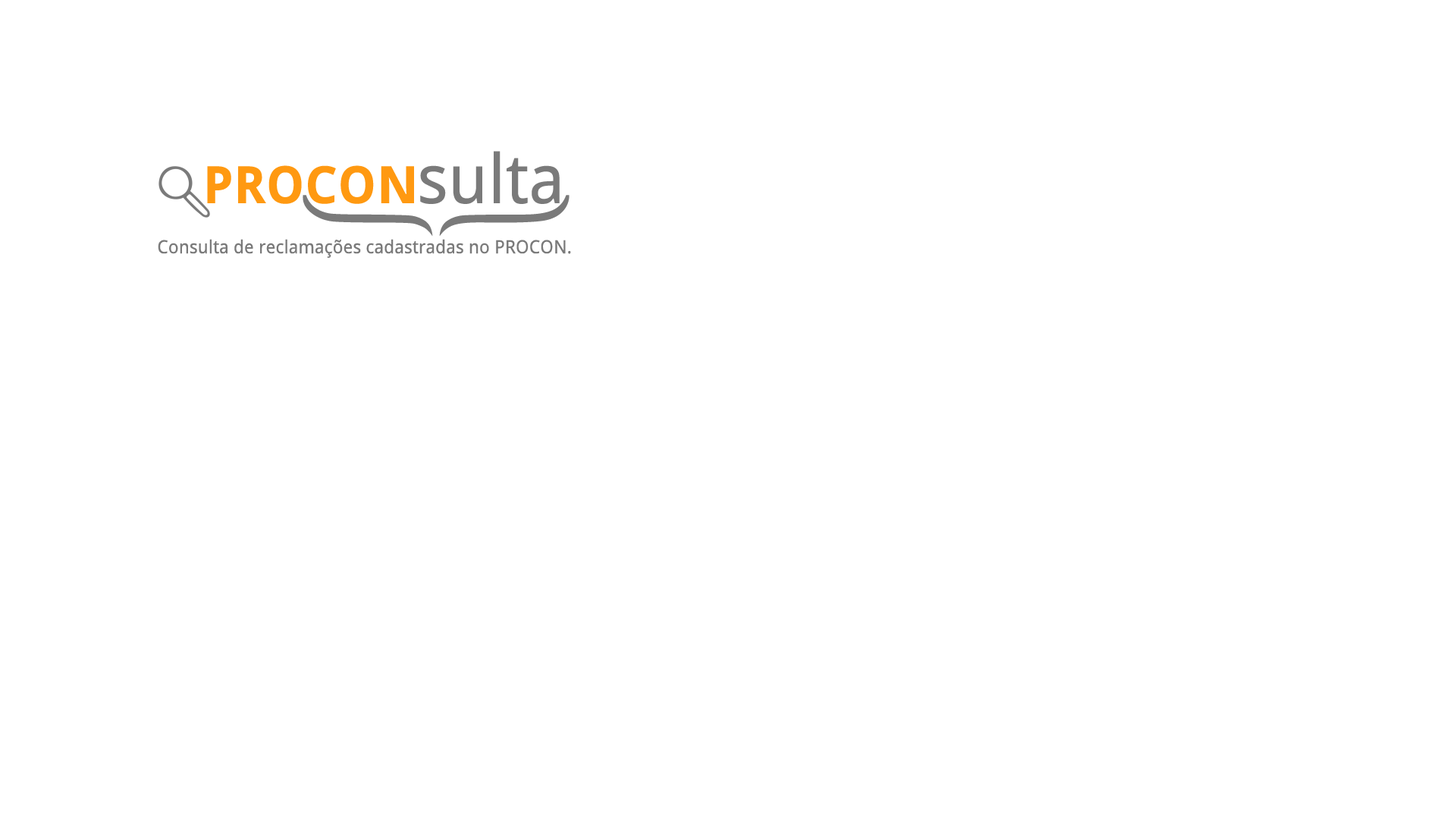
<style>
.page{position:relative;width:1456px;height:819px;background:#ffffff}
.page>*{position:absolute;margin:0}
.t1{font:51.6px "DroidSans-Bold";color:#ff9911}
.t2{font:68.2px "DroidSans";color:#7a7a7a}
.t3{font:18.2px "DroidSans";color:#7a7a7a}
</style>
<div class="page">
<p class="t1" style="left:207px;top:151px;width:353px;height:53px">PROCON<span class="t2">sulta</span></p>
<p class="t3" style="left:158px;top:239px;width:413px;height:19px">Consulta de reclamações cadastradas no PROCON.</p>
</div>
